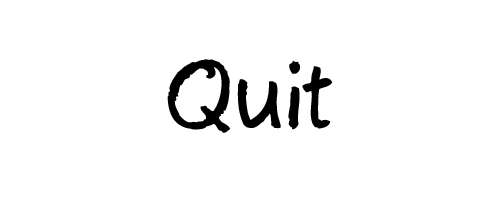
<style>
.page{position:relative;width:500px;height:200px;background:#ffffff}
.page>*{position:absolute;margin:0}
.t1{font:90px "AxureHandwriting";color:#000000}
</style>
<div class="page">
<p class="t1" style="left:167px;top:59px;width:166px;height:74px">Quit</p>
</div>
